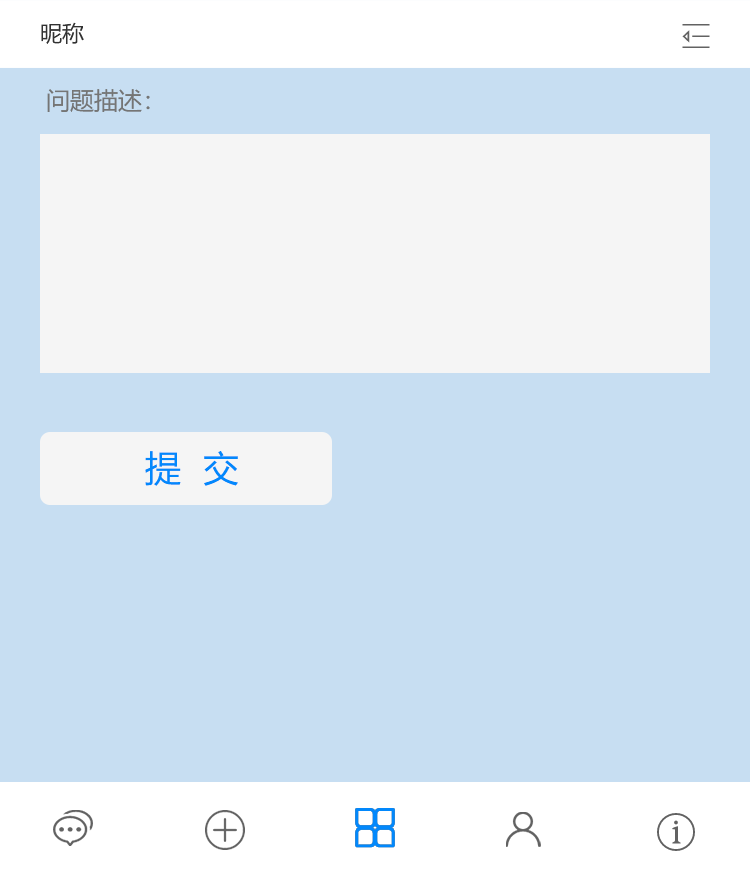
<style>
.page{position:relative;width:750px;height:880px;background:#c7def2}
.page>*{position:absolute;margin:0}
.t1{font:22px "MicrosoftYaHei";color:#323232;text-transform:uppercase}
.t2{font:24px "MicrosoftYaHei";color:#757575;text-transform:uppercase}
.t3{font:36px "MicrosoftYaHei";color:#0288fc;text-transform:uppercase}
</style>
<div class="page">
<p class="t1" style="left:41px;top:22px;width:43px;height:22px">昵称</p>
<p class="t2" style="left:47px;top:89px;width:103px;height:23px">问题描述：</p>
<p class="t3" style="left:145px;top:451px;width:93px;height:35px">提  交</p>
</div>
